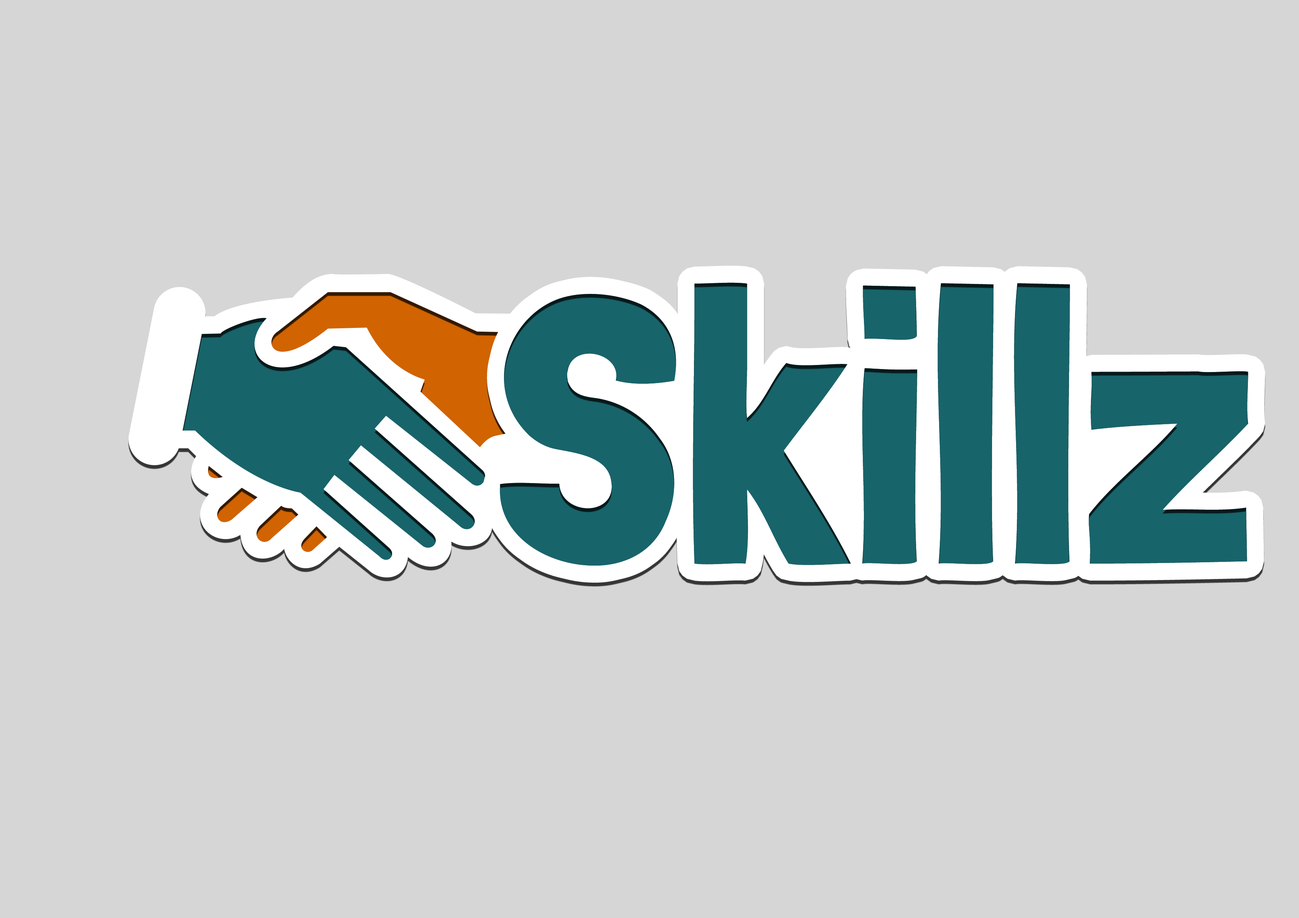
<style>
.page{position:relative;width:1299px;height:918px;background:#d6d6d6}
.page>*{position:absolute;margin:0}
.t1{font:385.6px "LondrinaSolid-Regular";letter-spacing:-0.01em;color:#18646b}
.t2{font:385.6px "LondrinaSolid-Regular";letter-spacing:-0.025em;color:#18646b}
</style>
<div class="page">
<p class="t1" style="left:500px;top:282px;width:748px;height:284px"><span class="t2">S</span>killz</p>
</div>
